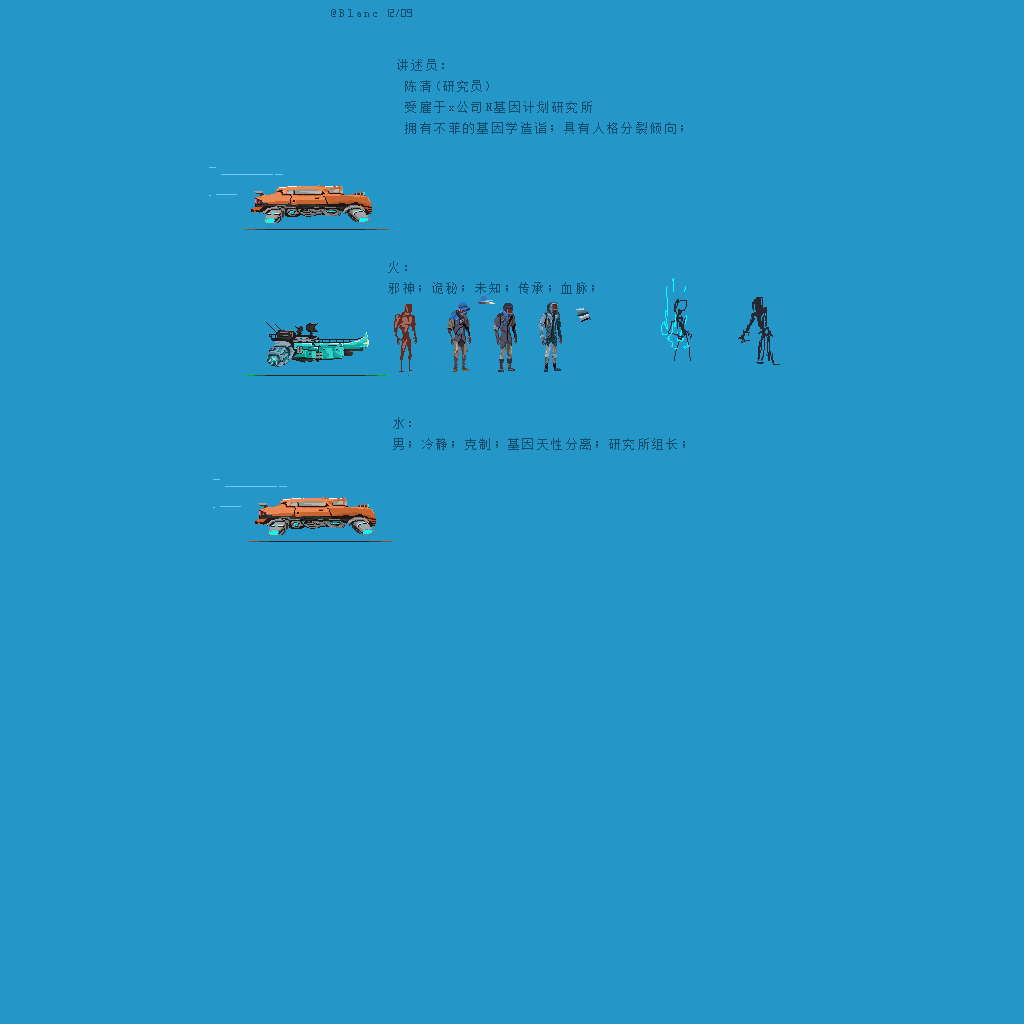
<style>
.page{position:relative;width:1024px;height:1024px;background:#2596c8}
.page>*{position:absolute;margin:0}
.t1{font:10.7px "FZXS12--GB1-0";letter-spacing:0.2em;color:#064b69}
.t2{font:12px "FZXS12--GB1-0";letter-spacing:0.2em;color:#064b69}
</style>
<div class="page">
<p class="t1" style="left:331px;top:9px;width:46px;height:8px">@Blanc</p>
<p class="t2" style="left:397px;top:59px;width:286px;height:75px">讲述员：<br> 陈清(研究员)<br> 受雇于x公司N基因计划研究所<br> 拥有不菲的基因学造诣；具有人格分裂倾向；</p>
<p class="t2" style="left:388px;top:261px;width:206px;height:33px">火：<br>邪神；诡秘；未知；传承；血脉；</p>
<p class="t2" style="left:393px;top:417px;width:292px;height:33px">水：<br>男；冷静；克制；基因天性分离；研究所组长；</p>
</div>
